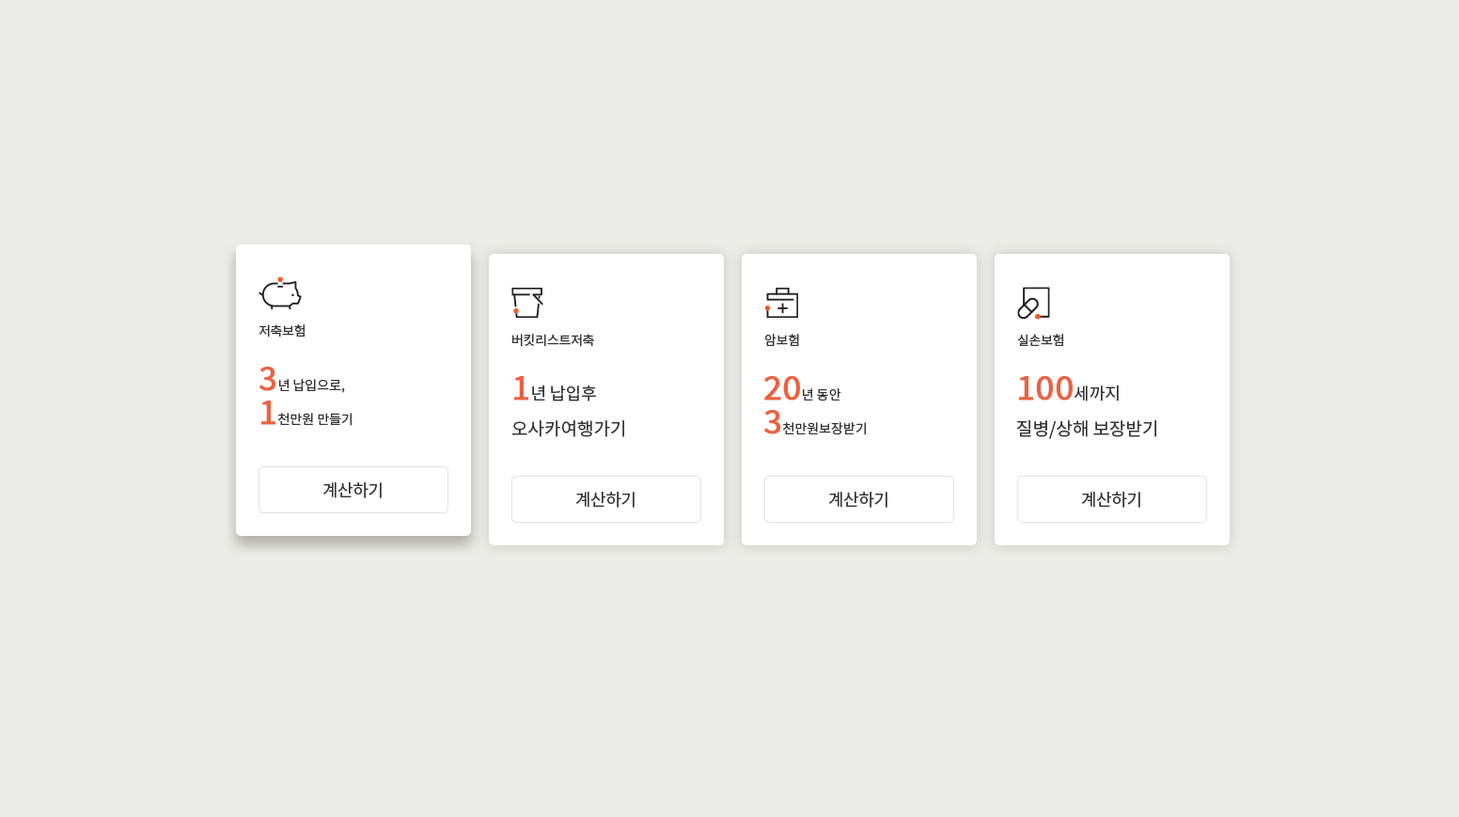
<style>
.page{position:relative;width:1459px;height:817px;background:#ecede8}
.page>*{position:absolute;margin:0}
.t1{font:13.2px "NotoSansKR-Regular";letter-spacing:-0.02em;color:#333333}
.t2{font:13.2px/33.9px "NotoSansKR-Regular";color:#333333}
.t3{font:32.9px/33.9px "NotoSansKR-Regular";color:#eb6242;font-weight:bold}
.t4{font:17.9px/33.9px "NotoSansKR-Regular";color:#333333}
.t5{font:16.9px/48.9px "NotoSansKR-Regular";color:#333333}
.t6{font:13.2px/30.1px "NotoSansKR-Regular";color:#333333}
.t7{font:16.9px "NotoSansKR-Regular";letter-spacing:-0.02em;color:#333333}
</style>
<div class="page">
<p class="t1" style="left:259px;top:324px;width:46px;height:14px">저축보험</p>
<p class="t1" style="left:512px;top:334px;width:82px;height:13px">버킷리스트저축</p>
<p class="t1" style="left:765px;top:334px;width:34px;height:12px">암보험</p>
<p class="t1" style="left:1017px;top:334px;width:46px;height:12px">실손보험</p>
<p class="t2" style="left:260px;top:367px;width:92px;height:59px"><span class="t3">3</span>년 납입으로,<br><span class="t3">1</span>천만원 만들기</p>
<p class="t4" style="left:512px;top:376px;width:112px;height:61px"><span class="t3">1</span><span class="t5">년 납입후<br></span>오사카여행가기</p>
<p class="t2" style="left:764px;top:376px;width:102px;height:59px"><span class="t3">20</span><span class="t6">년 동안<br></span><span class="t3">3</span>천만원보장받기</p>
<p class="t4" style="left:1017px;top:376px;width:140px;height:63px"><span class="t3">100</span><span class="t5">세까지<br></span>질병/상해 보장받기</p>
<p class="t7" style="left:323px;top:482px;width:59px;height:16px">계산하기</p>
<p class="t7" style="left:575px;top:492px;width:60px;height:16px">계산하기</p>
<p class="t7" style="left:828px;top:492px;width:60px;height:16px">계산하기</p>
<p class="t7" style="left:1081px;top:492px;width:60px;height:16px">계산하기</p>
</div>
